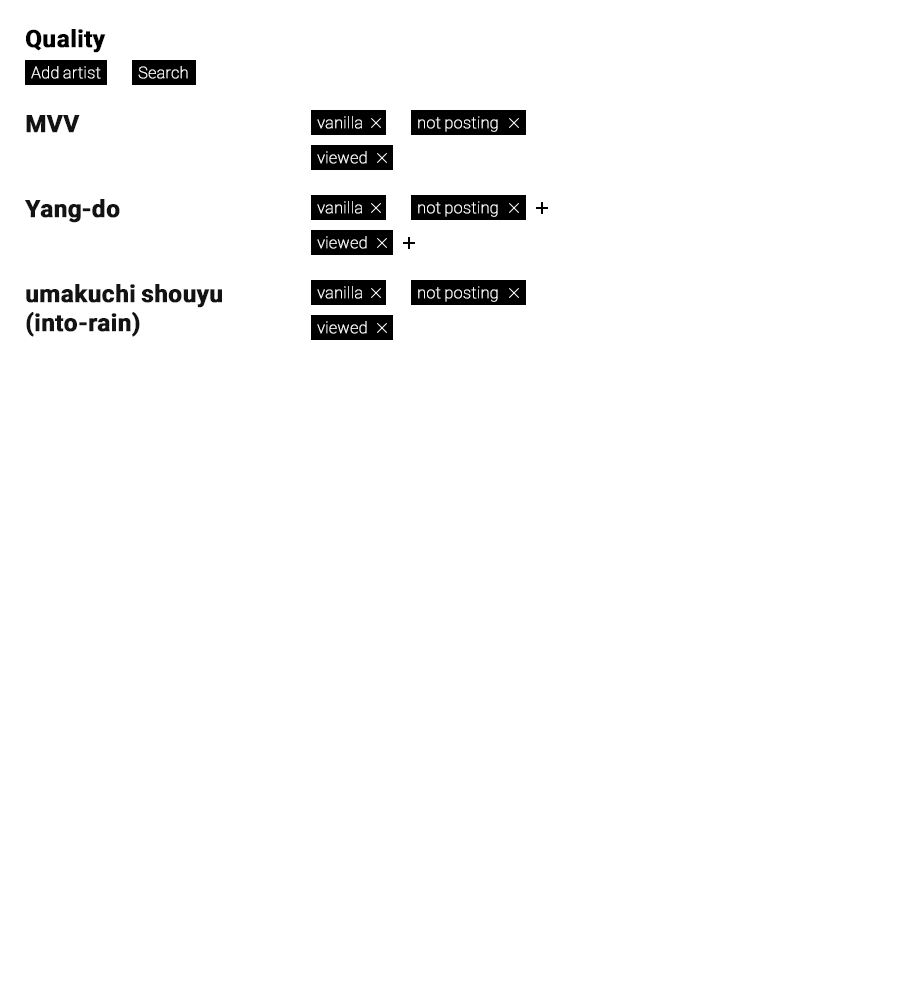
<style>
.page{position:relative;width:910px;height:1000px;background:#ffffff}
.page>*{position:absolute;margin:0}
.t1{font:24px "Roboto-Bold";color:#000000;font-weight:bold}
.t2{font:16px "Roboto-Thin";color:#ffffff;font-weight:bold}
.t3{font:24px "Roboto-Bold";color:#131313;font-weight:bold}
</style>
<div class="page">
<p class="t1" style="left:26px;top:29px;width:80px;height:24px">Quality</p>
<p class="t2" style="left:31px;top:66px;width:70px;height:13px">Add artist</p>
<p class="t2" style="left:138px;top:66px;width:50px;height:13px">Search</p>
<p class="t3" style="left:26px;top:115px;width:54px;height:18px">MVV</p>
<p class="t2" style="left:317px;top:116px;width:45px;height:13px">vanilla</p>
<p class="t2" style="left:418px;top:116px;width:80px;height:16px">not posting</p>
<p class="t2" style="left:317px;top:151px;width:50px;height:13px">viewed</p>
<p class="t3" style="left:25px;top:199px;width:95px;height:24px">Yang-do</p>
<p class="t2" style="left:317px;top:201px;width:45px;height:13px">vanilla</p>
<p class="t2" style="left:418px;top:201px;width:80px;height:16px">not posting</p>
<p class="t2" style="left:317px;top:236px;width:50px;height:13px">viewed</p>
<p class="t3" style="left:26px;top:284px;width:196px;height:53px">umakuchi shouyu (into-rain)</p>
<p class="t2" style="left:317px;top:286px;width:45px;height:13px">vanilla</p>
<p class="t2" style="left:418px;top:286px;width:80px;height:16px">not posting</p>
<p class="t2" style="left:317px;top:321px;width:50px;height:13px">viewed</p>
</div>
